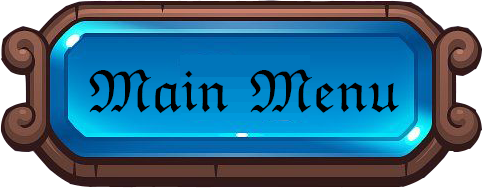
<style>
.page{position:relative;width:482px;height:188px}
.page>*{position:absolute;margin:0}
.t1{font:60px "EuclidFraktur";color:#000000}
</style>
<div class="page">
<p class="t1" style="left:89px;top:69px;width:310px;height:45px">Main Menu</p>
</div>
